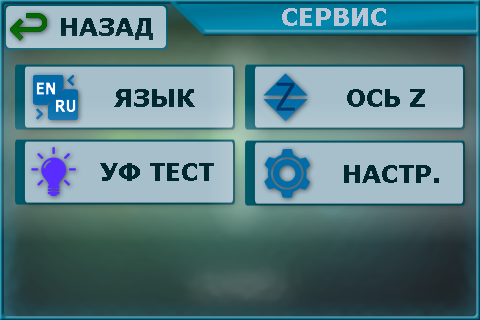
<style>
.page{position:relative;width:480px;height:320px}
.page>*{position:absolute;margin:0}
.t1{font:24px "Verdana-Bold";color:#bac5d5}
.t2{font:24px "Verdana-Bold";color:#00272e}
</style>
<div class="page">
<p class="t1" style="left:282px;top:8px;width:104px;height:18px">СЕРВИС</p>
<p class="t2" style="left:61px;top:18px;width:92px;height:22px">НАЗАД</p>
<p class="t2" style="left:114px;top:89px;width:81px;height:18px">ЯЗЫК</p>
<p class="t2" style="left:347px;top:89px;width:78px;height:18px">ОСЬ Z</p>
<p class="t2" style="left:100px;top:163px;width:114px;height:18px">УФ ТЕСТ</p>
<p class="t2" style="left:344px;top:165px;width:95px;height:18px">НАСТР.</p>
</div>
